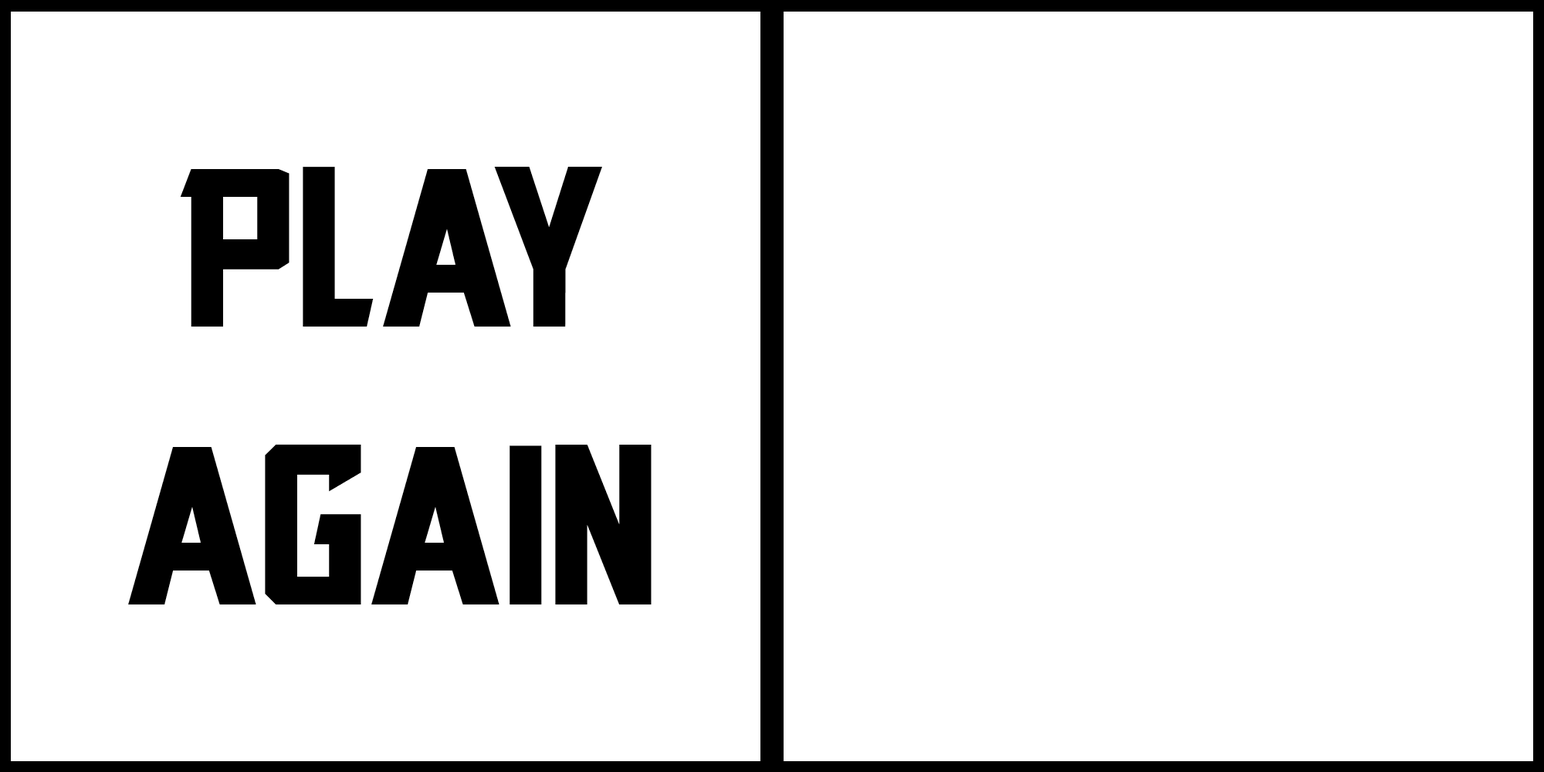
<style>
.page{position:relative;width:1544px;height:772px;background:#ffffff}
.page>*{position:absolute;margin:0}
.t1{font:231.6px "Blocktastic";color:#000000}
</style>
<div class="page">
<p class="t1" style="left:128px;top:167px;width:524px;height:438px;text-align:center">play<br>again</p>
</div>
